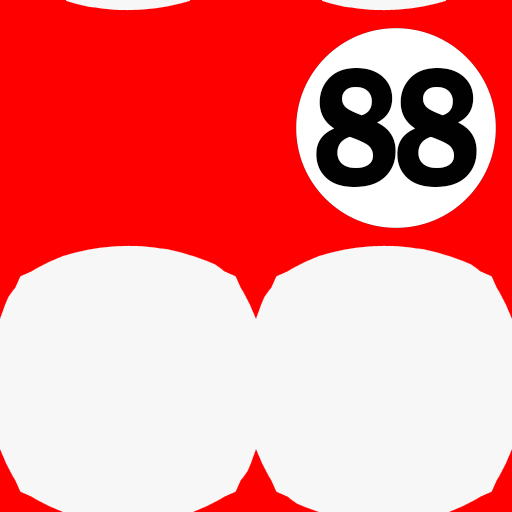
<style>
.page{position:relative;width:512px;height:512px;background:#f7f7f7}
.page>*{position:absolute;margin:0}
.t1{font:172.5px "FranklinGothic-Demi";letter-spacing:-0.05em;color:#010101;scale:0.87 1}
</style>
<div class="page">
<p class="t1" style="left:316px;top:68px;width:161px;height:119px">88</p>
</div>
